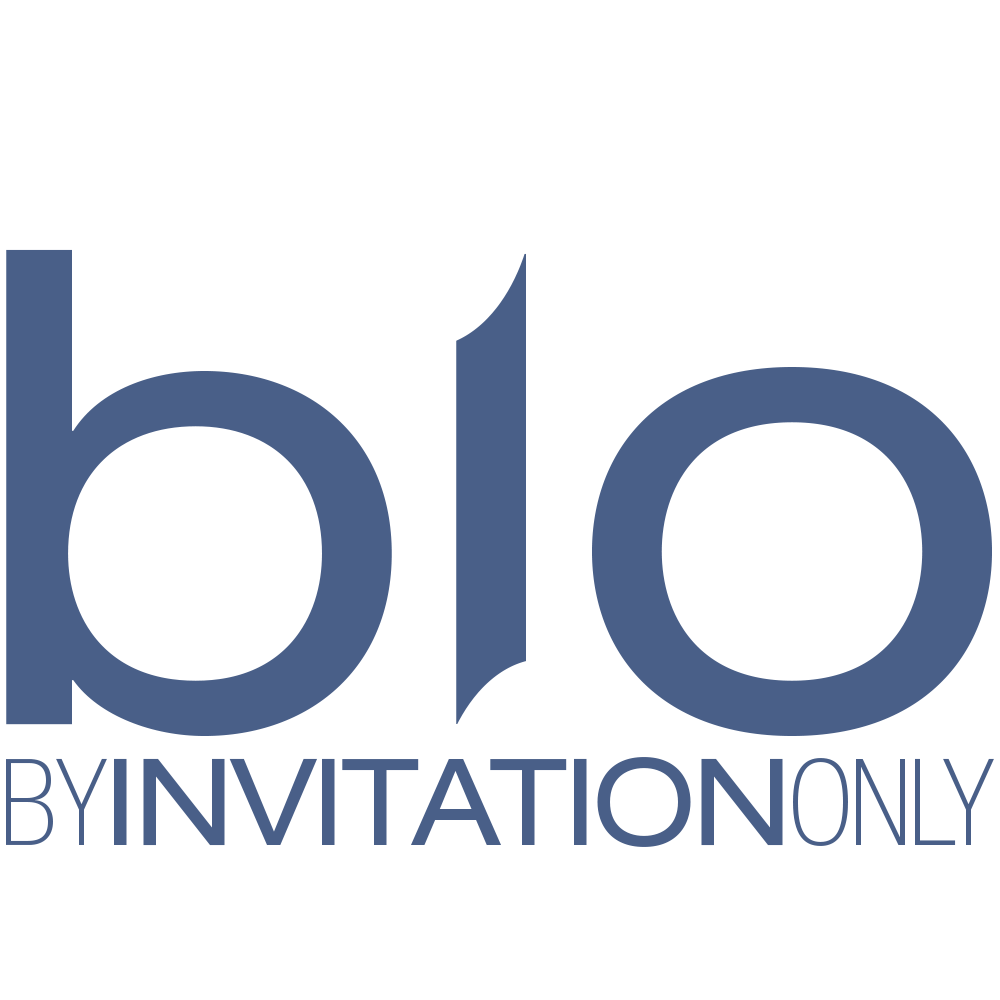
<style>
.page{position:relative;width:1000px;height:1000px;background:#ffffff}
.page>*{position:absolute;margin:0}
.t1{font:120.8px "HelveticaNeue-Extended";letter-spacing:-0.025em;color:#495f88}
.t2{font:120.8px "HelveticaNeueLT-ThinCond";letter-spacing:-0.025em;color:#495f88}
</style>
<div class="page">
<p class="t1" style="left:6px;top:757px;width:988px;height:90px"><span class="t2">BY</span>INVITATION<span class="t2">ONLY</span></p>
</div>
